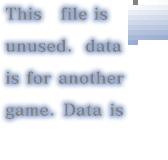
<style>
.page{position:relative;width:168px;height:160px;background:#ffffff}
.page>*{position:absolute;margin:0}
.t1{font:16px/32px "MatissePro-B";letter-spacing:0.015em;color:#828282}
.t2{font:16px/18px "MatissePro-B";letter-spacing:0.015em;color:#828282}
</style>
<div class="page">
<p class="t1" style="left:5px;top:7px;width:120px;height:112px">This   <span class="t2">f ile</span> is<br>unused.  data<br>is for another<br>game. Data is</p>
</div>
